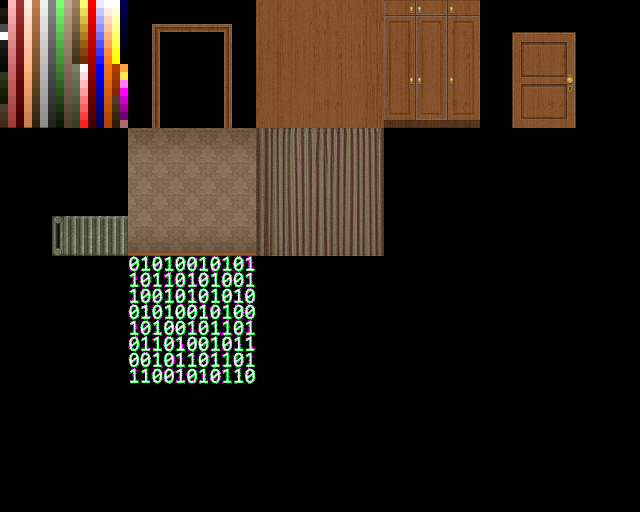
<style>
.page{position:relative;width:640px;height:512px;background:#000000}
.page>*{position:absolute;margin:0}
.t1{font:22px/16px "Consolas-Bold";letter-spacing:0.04em;scale:0.89 1}
</style>
<div class="page">
<p class="t1" style="left:129px;top:256px;width:126px;height:128px">01010010101<br>10110101001<br>10010101010<br>01010010100<br>10100101101<br>01101001011<br>00101101101<br>11001010110</p>
</div>
